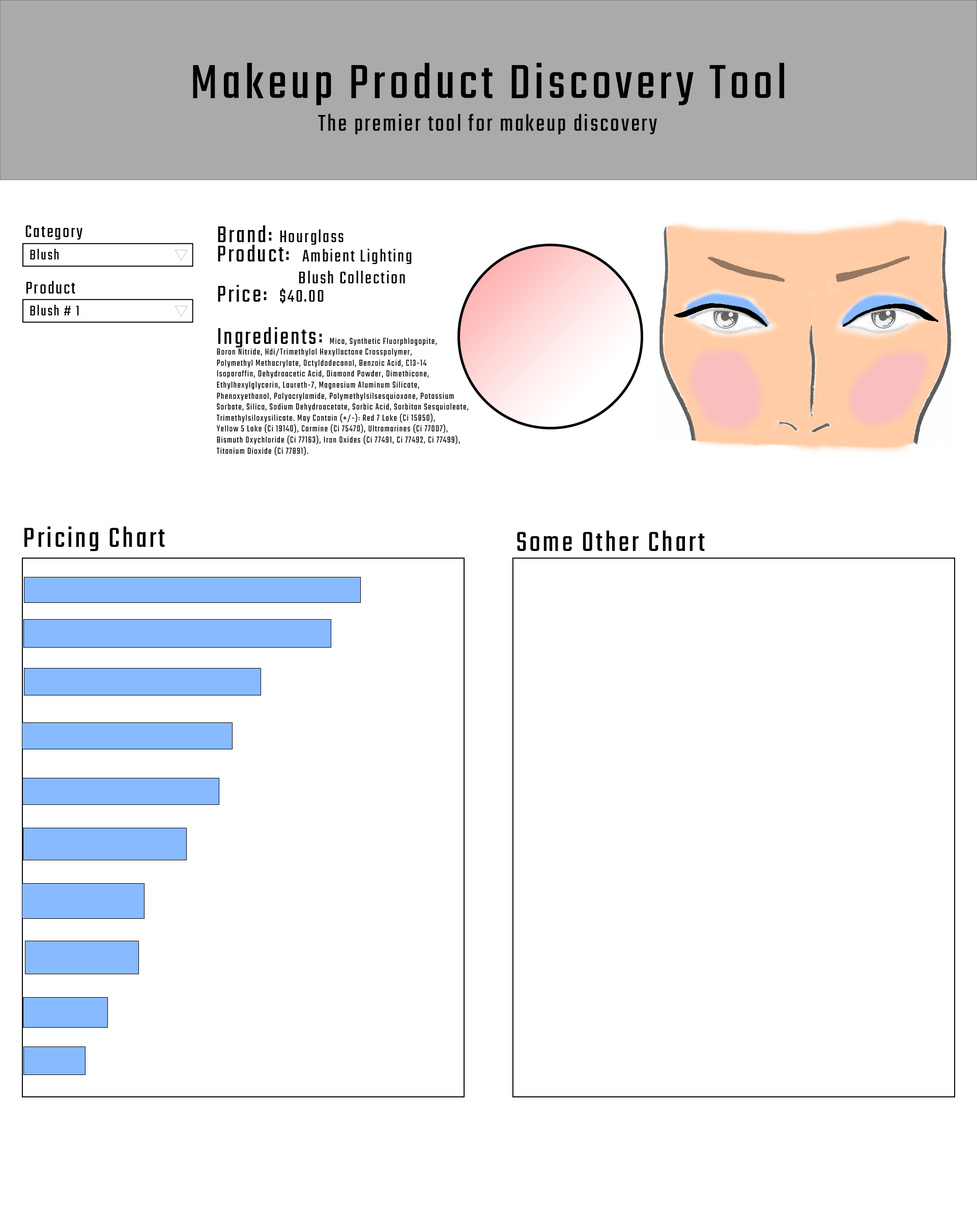
<style>
.page{position:relative;width:977px;height:1221px;background:#ffffff}
.page>*{position:absolute;margin:0}
.t1{font:52.9px "Teko-Regular";letter-spacing:0.075em;color:#000000}
.t2{font:24.4px "Teko-Regular";letter-spacing:0.075em;color:#000000}
.t3{font:18.3px "Teko-Regular";letter-spacing:0.075em;color:#000000}
.t4{font:15.3px "Teko-Regular";letter-spacing:0.075em;color:#000000}
.t5{font:9.2px "Teko-Regular";letter-spacing:0.075em;color:#000000}
.t6{font:30.5px "Teko-Regular";letter-spacing:0.075em;color:#000000}
</style>
<div class="page">
<p class="t1" style="left:193px;top:63px;width:591px;height:42px">Makeup Product Discovery Tool</p>
<p class="t2" style="left:318px;top:114px;width:339px;height:20px">The premier tool for makeup discovery</p>
<p class="t3" style="left:25px;top:225px;width:57px;height:15px">Category</p>
<p class="t3" style="left:218px;top:225px;width:125px;height:20px"><span class="t2">Brand: </span>Hourglass</p>
<p class="t3" style="left:218px;top:245px;width:194px;height:38px"><span class="t2">Product:  </span>Ambient Lighting<br>      Blush Collection</p>
<p class="t4" style="left:30px;top:249px;width:29px;height:10px">Blush</p>
<p class="t3" style="left:26px;top:281px;width:49px;height:13px">Product</p>
<p class="t2" style="left:218px;top:285px;width:106px;height:18px">Price:  <span class="t3">$40.00</span></p>
<p class="t4" style="left:30px;top:305px;width:49px;height:10px">Blush # 1</p>
<p class="t5" style="left:216px;top:327px;width:253px;height:129px"><span class="t2">Ingredients: </span>Mica, Synthetic Fluorphlogopite, <br>Boron Nitride, Hdi/Trimethylol Hexyllactone Crosspolymer, <br>Polymethyl Methacrylate, Octyldodecanol, Benzoic Acid, C13-14 <br>Isoparaffin, Dehydroacetic Acid, Diamond Powder, Dimethicone, <br>Ethylhexylglycerin, Laureth-7, Magnesium Aluminum Silicate, <br>Phenoxyethanol, Polyacrylamide, Polymethylsilsesquioxane, Potassium <br>Sorbate, Silica, Sodium Dehydroacetate, Sorbic Acid, Sorbitan Sesquioleate, <br>Trimethylsiloxysilicate. May Contain (+/-): Red 7 Lake (Ci 15850), <br>Yellow 5 Lake (Ci 19140), Carmine (Ci 75470), Ultramarines (Ci 77007), <br>Bismuth Oxychloride (Ci 77163), Iron Oxides (Ci 77491, Ci 77492, Ci 77499), <br>Titanium Dioxide (Ci 77891).</p>
<p class="t6" style="left:24px;top:526px;width:141px;height:25px">Pricing Chart</p>
<p class="t6" style="left:517px;top:530px;width:188px;height:21px">Some Other Chart</p>
</div>
